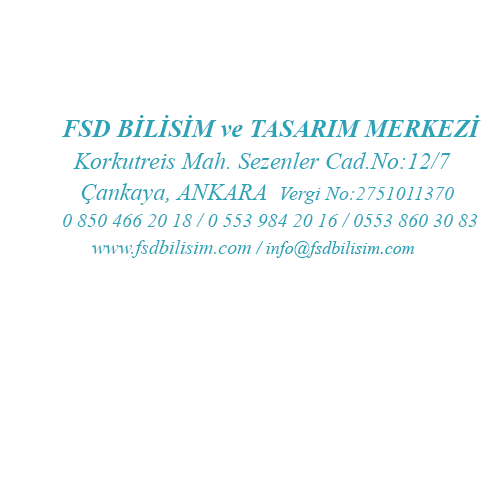
<style>
.page{position:relative;width:500px;height:500px;background:#ffffff}
.page>*{position:absolute;margin:0}
.t1{font:20px "TimesNewRomanPS-ItalicMT";color:#2da3b8}
.t2{font:25px "TimesNewRomanPS-BoldItalicMT";color:#2da3b8}
.t3{font:24px "TimesNewRomanPS-ItalicMT";color:#2da3b8}
.t4{font:18px "TimesNewRomanPS-ItalicMT";color:#2da3b8}
</style>
<div class="page">
<p class="t1" style="left:62px;top:115px;width:419px;height:143px"><span class="t2">FSD BİLİSİM ve TASARIM MERKEZİ<br></span><span class="t3">  Korkutreis Mah. Sezenler Cad.No:12/7 <br>   Çankaya, ANKARA  </span>Vergi No:2751011370 <br>0 850 466 20 18 / 0 553 984 20 16 / 0553 860 30 83 <br>      www.fsdbilisim.com<span class="t4"> / info@fsdbilisim.com</span></p>
</div>
